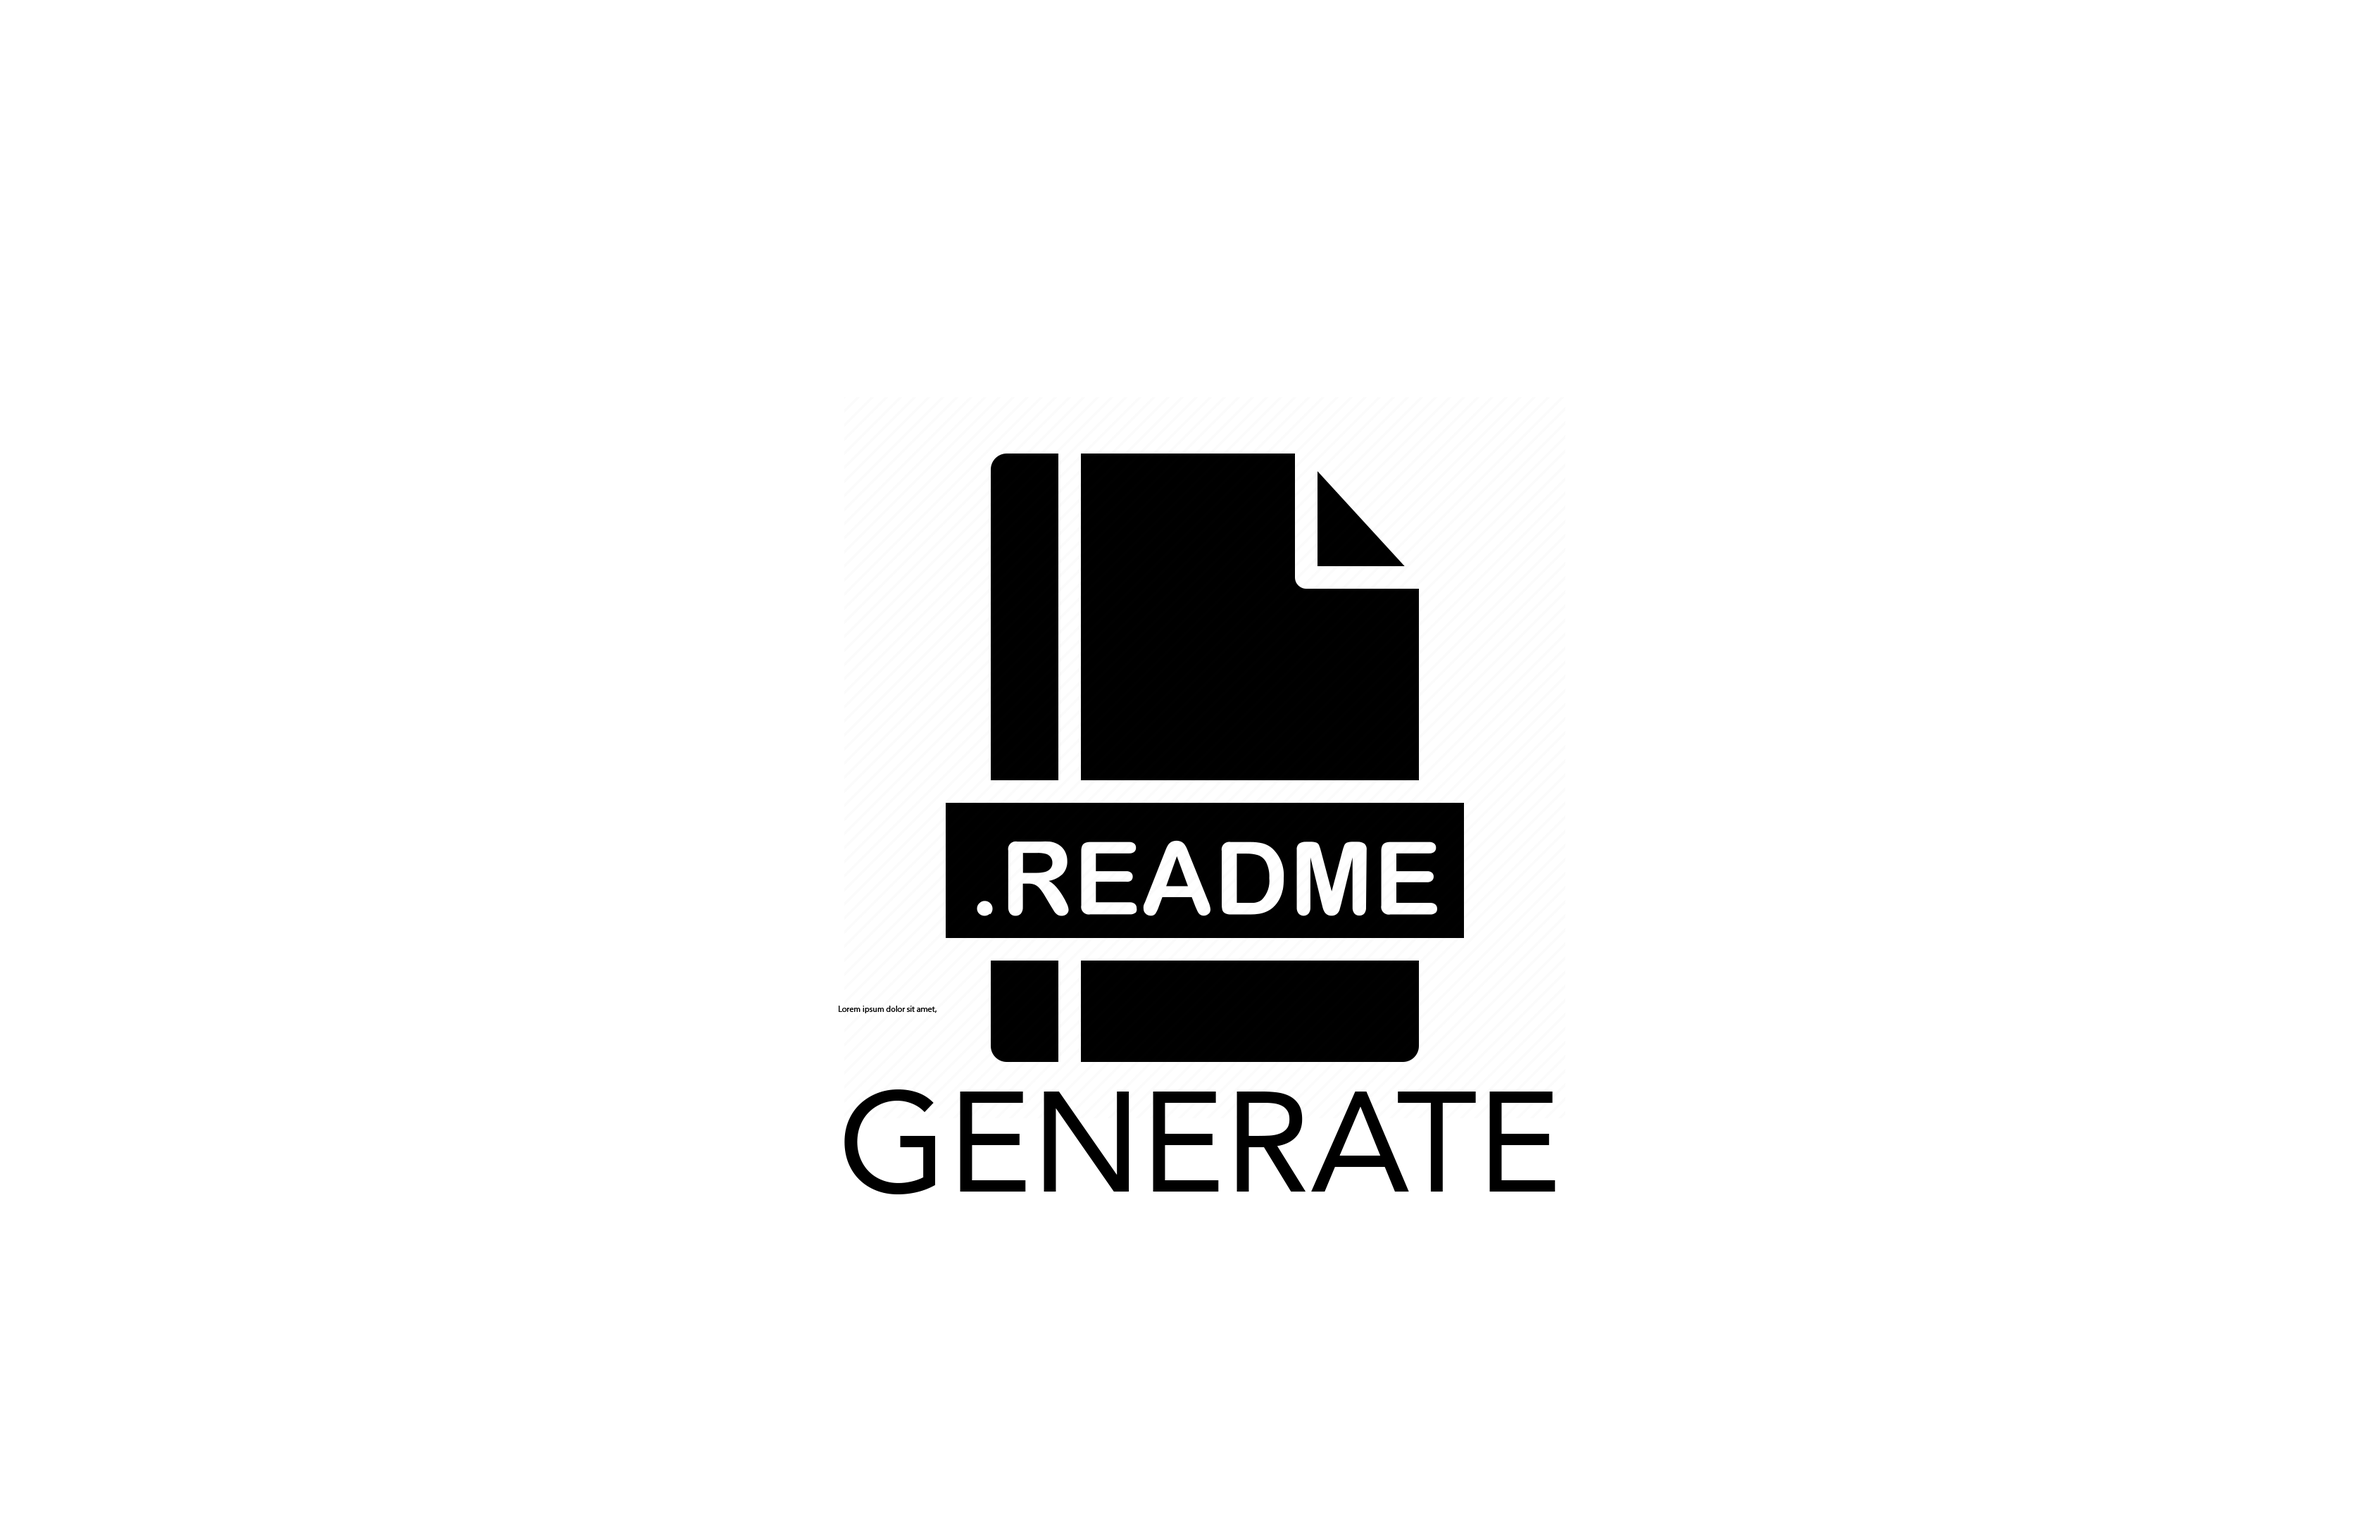
<style>
.page{position:relative;width:2366px;height:1538px;background:#ffffff}
.page>*{position:absolute;margin:0}
.t1{font:8.4px "MyriadPro-Regular";color:#000000}
.t2{font:140.8px "Avenir-Roman";color:#000000}
</style>
<div class="page">
<p class="t1" style="left:839px;top:1005px;width:716px;height:189px">Lorem ipsum dolor sit amet, <br><br><span class="t2">GENERATE</span></p>
</div>
